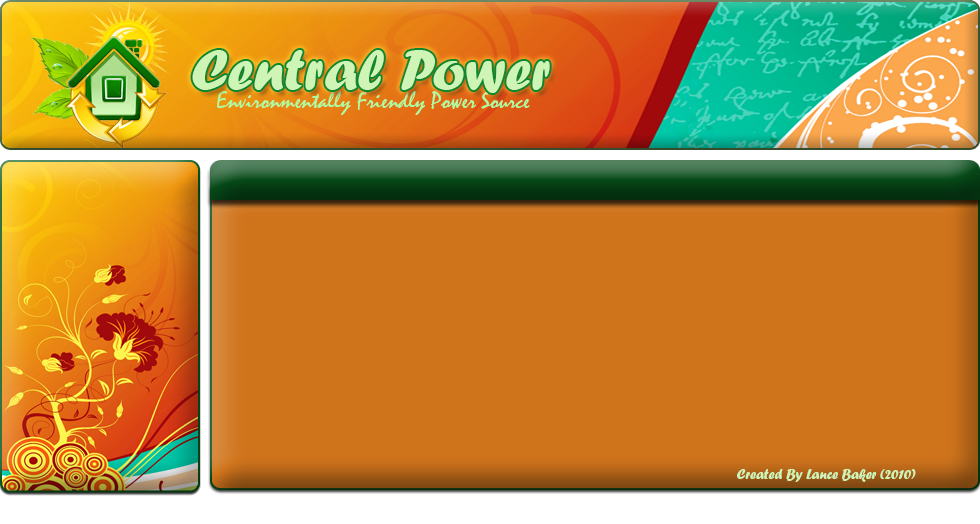
<style>
.page{position:relative;width:980px;height:524px;background:#d0741c}
.page>*{position:absolute;margin:0}
.t1{font:60px "ForteMT";color:#cef5b5}
.t2{font:24px "Mistral";color:#acfea1}
.t3{font:14px "ForteMT";color:#cef5b5}
</style>
<div class="page">
<p class="t1" style="left:192px;top:50px;width:358px;height:43px">Central Power</p>
<p class="t2" style="left:217px;top:90px;width:313px;height:25px">Environmentally Friendly Power Source</p>
<p class="t3" style="left:737px;top:469px;width:179px;height:13px">Created By Lance Baker (2010)</p>
</div>
